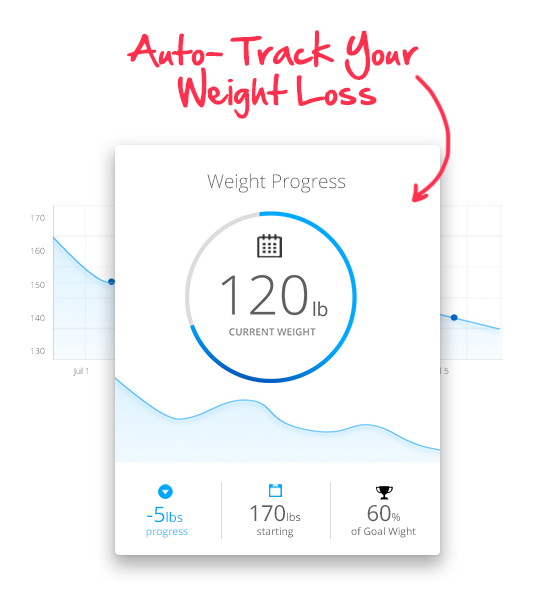
<style>
.page{position:relative;width:541px;height:602px;background:#ffffff}
.page>*{position:absolute;margin:0}
.t1{font:33.9px "HandOfSean";color:#ff304e}
.t2{font:19px "OpenSans-Light";color:#5e5e5e}
.t3{font:12.9px "OpenSans";color:#00a8ff}
.t4{font:21.6px "OpenSans";color:#00a8ff}
.t5{font:22px "OpenSans";color:#5e5e5e}
.t6{font:11px "OpenSans";color:#5e5e5e}
.t7{font:10.3px "OpenSans"}
.t8{font:10.3px "OpenSans";color:#5e5e5e}
</style>
<div class="page">
<p class="t1" style="left:126px;top:30px;width:293px;height:89px;text-align:center">Auto- Track Your <br>Weight Loss</p>
<p class="t2" style="left:207px;top:173px;width:139px;height:20px">Weight Progress</p>
<p class="t3" style="left:147px;top:506px;width:36px;height:17px"><span class="t4">-5</span>lbs</p>
<p class="t5" style="left:250px;top:505px;width:51px;height:17px">170<span class="t6">lbs</span></p>
<p class="t5" style="left:367px;top:505px;width:33px;height:17px">60<span class="t6">%</span></p>
<p class="t7" style="left:146px;top:529px;width:42px;height:9px">progress</p>
<p class="t8" style="left:257px;top:527px;width:36px;height:11px">starting</p>
<p class="t8" style="left:351px;top:527px;width:65px;height:11px">of Goal Wight</p>
</div>
